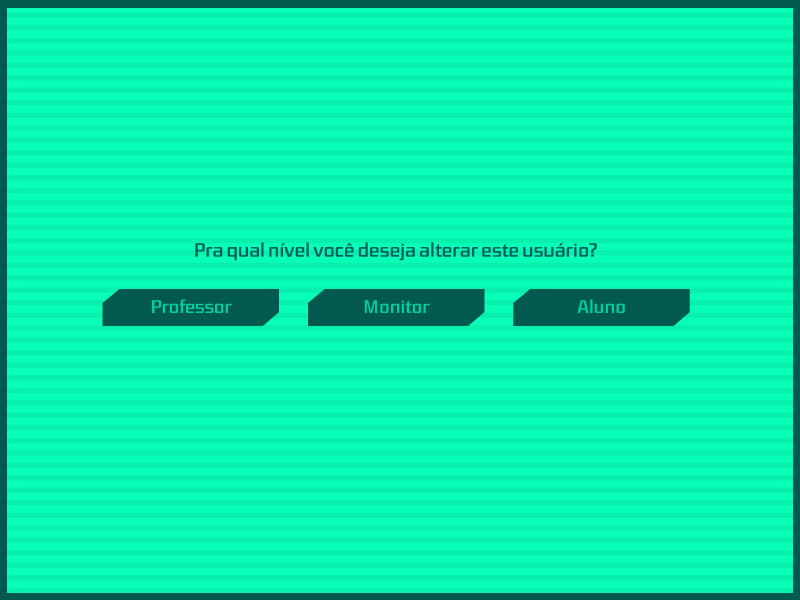
<style>
.page{position:relative;width:800px;height:600px;background:#09efad}
.page>*{position:absolute;margin:0}
.t1{font:18.9px "DistrictTF-Regular";color:#00605d}
</style>
<div class="page">
<p class="t1" style="left:195px;top:242px;width:402px;height:19px">Pra qual nível você deseja alterar este usuário?</p>
</div>
